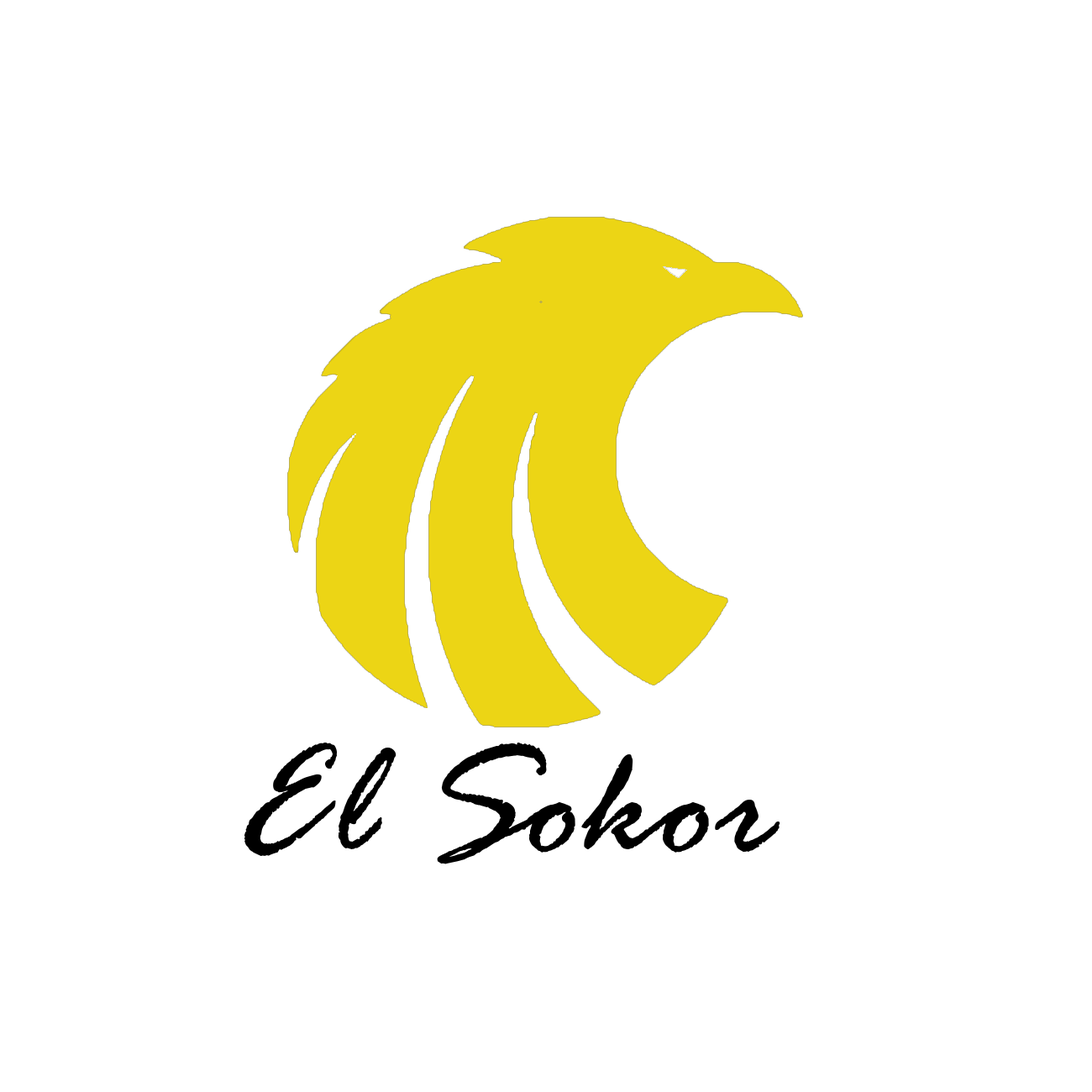
<style>
.page{position:relative;width:1092px;height:1092px;background:#ffffff}
.page>*{position:absolute;margin:0}
.t1{font:168px "RageItalic";color:#000000}
</style>
<div class="page">
<p class="t1" style="left:244px;top:743px;width:536px;height:121px">El Sokor</p>
</div>
